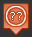
<style>
.page{position:relative;width:32px;height:37px}
.page>*{position:absolute;margin:0}
.t1{font:12px "Gautami";color:#ffffff}
</style>
<div class="page">
<p class="t1" style="left:10px;top:12px;width:12px;height:8px">??</p>
</div>
